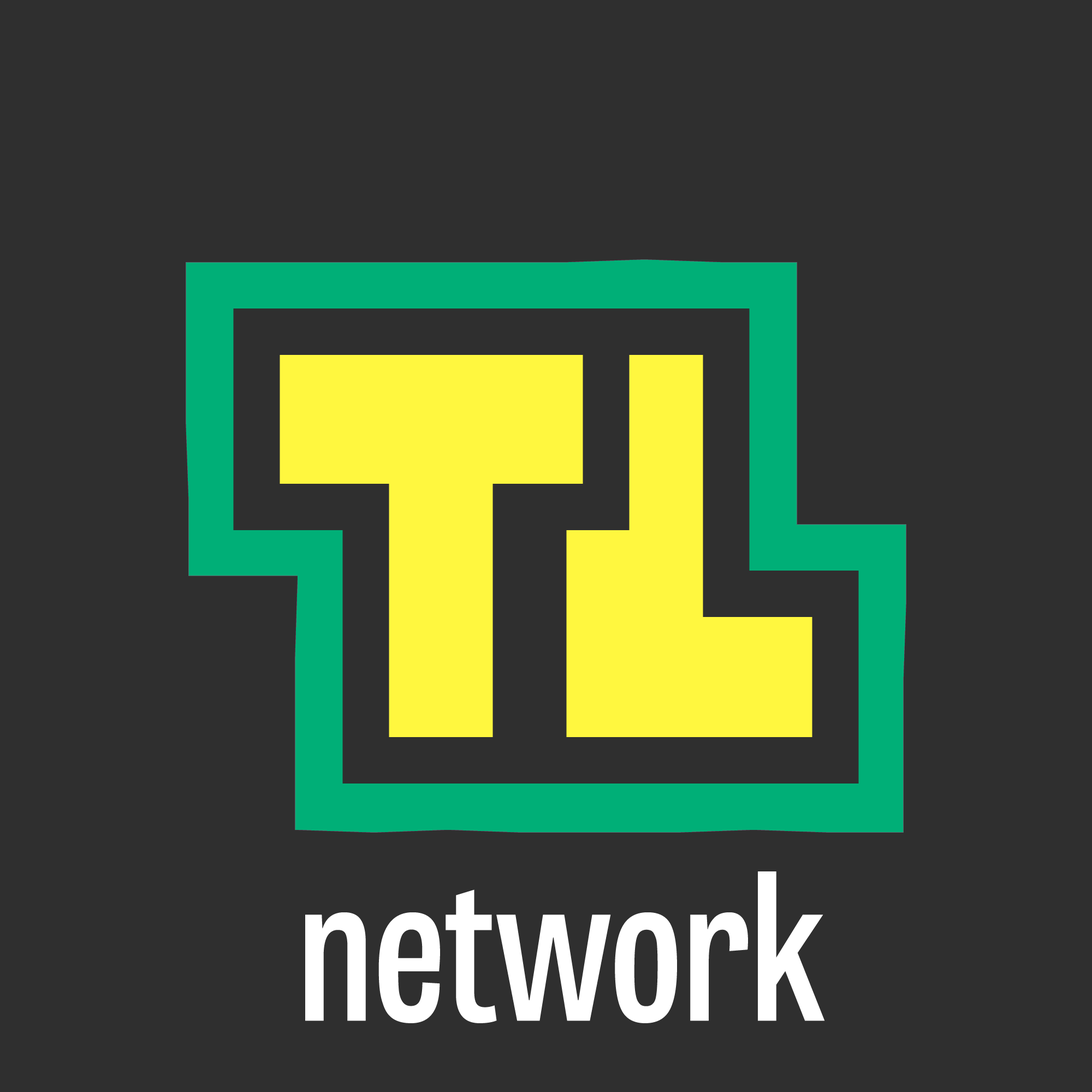
<style>
.page{position:relative;width:1092px;height:1092px;background:#2f2f2f}
.page>*{position:absolute;margin:0}
.t1{font:203.2px "TabletGothicCompressed-SemiBold";color:#ffffff}
</style>
<div class="page">
<p class="t1" style="left:305px;top:871px;width:520px;height:152px">network</p>
</div>
